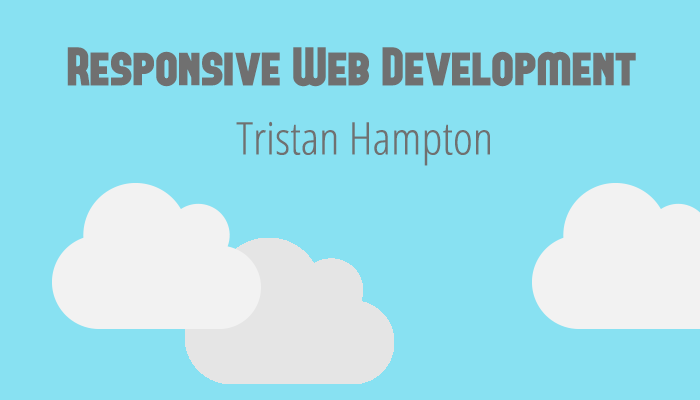
<style>
.page{position:relative;width:700px;height:400px;background:#88e1f2}
.page>*{position:absolute;margin:0}
.t1{font:54px "FORQUE";color:#707070;scale:1.07 1}
.t2{font:45px "OpenSansCondensed-Light";color:#707070;scale:1.07 1}
</style>
<div class="page">
<p class="t1" style="left:67px;top:47px;width:569px;height:40px">Responsive Web Development</p>
<p class="t2" style="left:236px;top:121px;width:254px;height:45px">Tristan Hampton</p>
</div>
